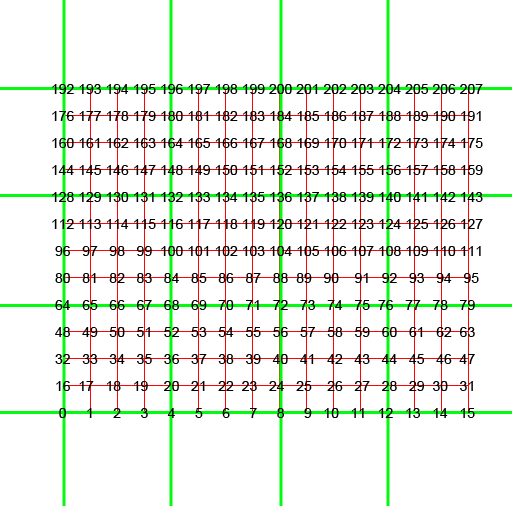
<style>
.page{position:relative;width:512px;height:512px;background:#ffffff}
.page>*{position:absolute;margin:0}
.t1{font:14px/27px "ArialMT";color:#000000}
</style>
<div class="page">
<p class="t1" style="left:52px;top:84px;width:431px;height:334px">192 193 194 195 196 197 198 199 200 201 202 203 204 205 206 207<br>176 177 178 179 180 181 182 183 184 185 186 187 188 189 190 191<br>160 161 162 163 164 165 166 167 168 169 170 171 172 173 174 175<br>144 145 146 147 148 149 150 151 152 153 154 155 156 157 158 159<br>128 129 130 131 132 133 134 135 136 137 138 139 140 141 142 143<br>112 113 114 115 116 117 118 119 120 121 122 123 124 125 126 127<br> 96   97   98   99  100 101 102 103 104 105 106 107 108 109 110 111<br> 80   81   82   83   84   85   86   87   88  89   90    91   92   93   94   95<br> 64   65   66   67   68   69   70   71   72   73   74   75  76   77   78   79<br> 48   49   50   51   52   53   54   55   56   57   58   59   60   61   62  63<br> 32   33   34   35   36   37   38   39   40   41   42   43   44   45   46  47<br> 16  17   18   19    20   21   22  23   24   25    26   27   28   29  30   31<br>  0     1     2     3     4     5     6     7     8     9   10   11   12   13   14   15</p>
</div>
